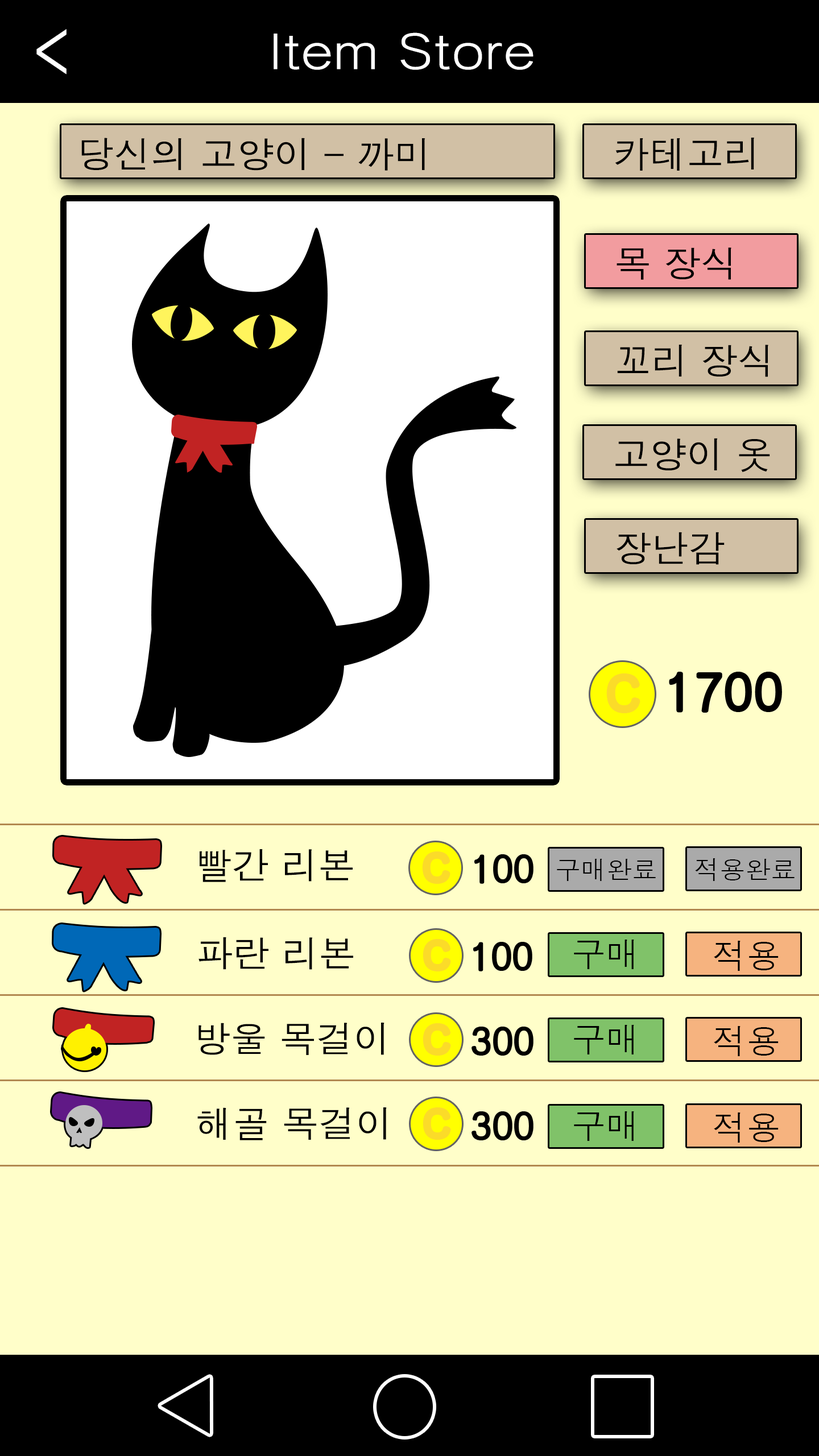
<style>
.page{position:relative;width:819px;height:1456px;background:#fffec9}
.page>*{position:absolute;margin:0}
.t1{font:77.3px "Haansoft-Dotum";color:#ffffff;scale:0.76 1}
.t2{font:49.6px "Haansoft-Dotum";color:#ffffff;scale:1.14 1}
.t3{font:37px "Haansoft-Dotum";color:#000000}
.t4{font:46.4px "Haansoft-Dotum";color:#fbdb29}
.t5{font:51.2px "Haansoft-Dotum";color:#000000}
.t6{font:37px "Haansoft-Dotum";color:#fbdb29}
.t7{font:25.6px "Haansoft-Dotum";color:#000000}
.t8{font:34.1px "Haansoft-Dotum";color:#000000}
</style>
<div class="page">
<p class="t1" style="left:36px;top:29px;width:31px;height:46px">&lt;</p>
<p class="t2" style="left:274px;top:32px;width:259px;height:38px">Item Store</p>
<p class="t3" style="left:81px;top:138px;width:344px;height:33px">당신의 고양이 - 까미</p>
<p class="t3" style="left:615px;top:138px;width:139px;height:33px">카테고리</p>
<p class="t3" style="left:617px;top:247px;width:114px;height:33px">목 장식</p>
<p class="t3" style="left:617px;top:345px;width:151px;height:32px">꼬리 장식</p>
<p class="t3" style="left:615px;top:438px;width:155px;height:34px">고양이 옷</p>
<p class="t3" style="left:617px;top:532px;width:108px;height:33px">장난감</p>
<p class="t4" style="left:609px;top:676px;width:29px;height:34px">C</p>
<p class="t5" style="left:671px;top:673px;width:109px;height:38px">1700</p>
<p class="t3" style="left:200px;top:849px;width:153px;height:33px">빨간 리본</p>
<p class="t6" style="left:425px;top:854px;width:23px;height:27px">C</p>
<p class="t3" style="left:475px;top:855px;width:57px;height:28px">100</p>
<p class="t7" style="left:557px;top:859px;width:99px;height:22px">구매완료</p>
<p class="t7" style="left:695px;top:858px;width:100px;height:23px">적용완료</p>
<p class="t3" style="left:198px;top:937px;width:155px;height:33px">파란 리본</p>
<p class="t6" style="left:425px;top:942px;width:23px;height:27px">C</p>
<p class="t8" style="left:574px;top:940px;width:60px;height:29px">구매</p>
<p class="t8" style="left:714px;top:941px;width:65px;height:30px">적용</p>
<p class="t3" style="left:474px;top:943px;width:57px;height:27px">100</p>
<p class="t3" style="left:198px;top:1023px;width:186px;height:32px">방울 목걸이</p>
<p class="t8" style="left:574px;top:1025px;width:60px;height:29px">구매</p>
<p class="t6" style="left:425px;top:1026px;width:23px;height:27px">C</p>
<p class="t3" style="left:473px;top:1028px;width:59px;height:26px">300</p>
<p class="t8" style="left:714px;top:1026px;width:65px;height:30px">적용</p>
<p class="t3" style="left:197px;top:1107px;width:190px;height:33px">해골 목걸이</p>
<p class="t6" style="left:425px;top:1110px;width:23px;height:27px">C</p>
<p class="t3" style="left:473px;top:1112px;width:59px;height:27px">300</p>
<p class="t8" style="left:574px;top:1111px;width:60px;height:30px">구매</p>
<p class="t8" style="left:714px;top:1112px;width:65px;height:31px">적용</p>
</div>
